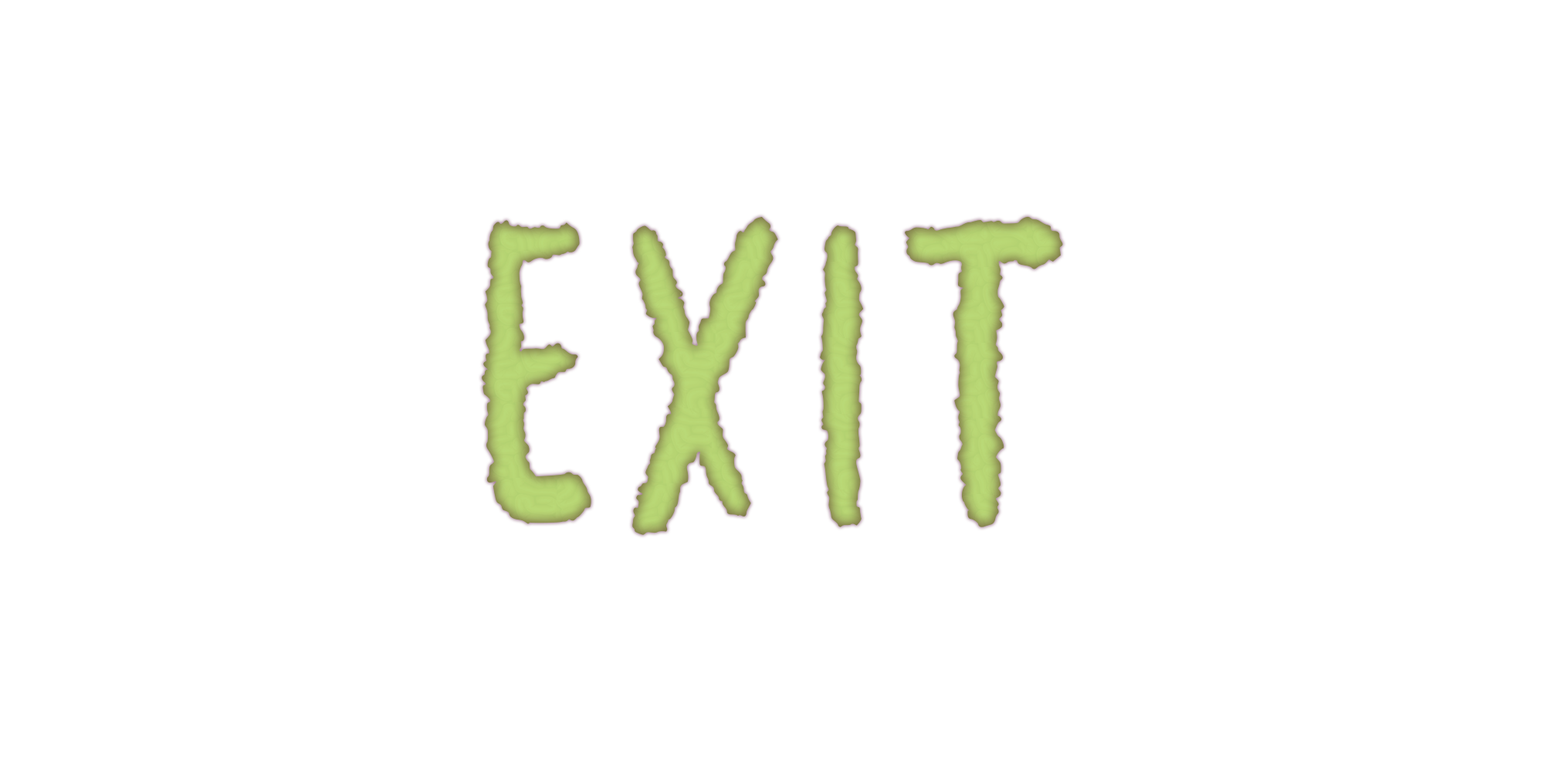
<style>
.page{position:relative;width:1544px;height:772px;background:#ffffff}
.page>*{position:absolute;margin:0}
.t1{font:321.7px "Metalien";letter-spacing:0.1em;color:#b7d974}
</style>
<div class="page">
<p class="t1" style="left:482px;top:216px;width:581px;height:319px">EXIT</p>
</div>
